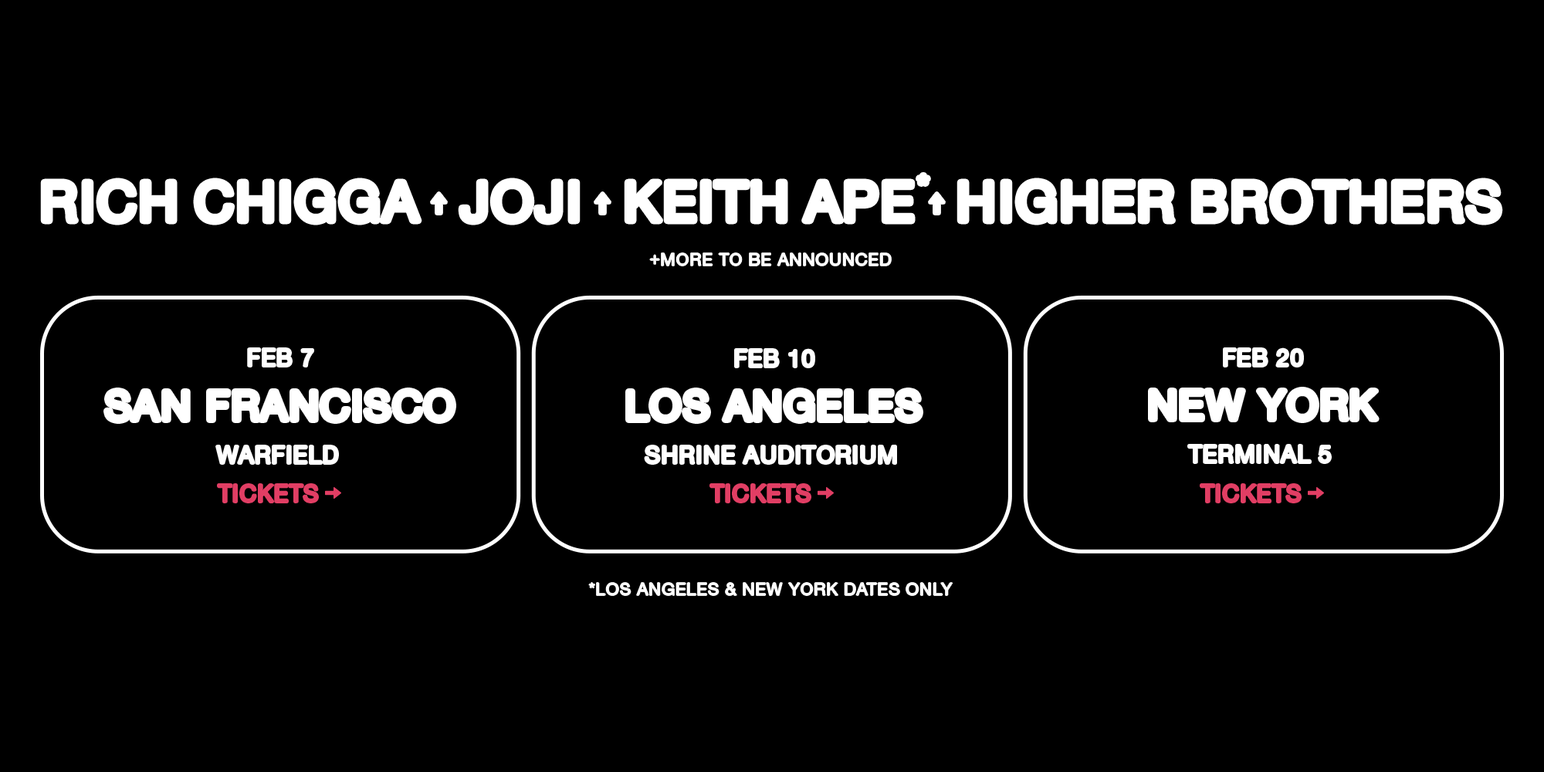
<style>
.page{position:relative;width:1544px;height:772px;background:#000000}
.page>*{position:absolute;margin:0}
.t1{font:54.4px "HelveticaNeueLTStd-Roman";letter-spacing:0.053em;color:#ffffff}
.t2{font:17px "HelveticaNeueLTStd-Roman";letter-spacing:0.05em;color:#ffffff}
.t3{font:23.2px "HelveticaNeueLTStd-Roman";letter-spacing:0.05em;color:#ffffff}
.t4{font:23.1px "HelveticaNeueLTStd-Roman";letter-spacing:0.05em;color:#ffffff}
.t5{font:40.4px "HelveticaNeueLTStd-Roman";letter-spacing:0.055em;color:#ffffff}
.t6{font:40.5px "HelveticaNeueLTStd-Roman";letter-spacing:0.055em;color:#ffffff}
.t7{font:23.2px "HelveticaNeueLTStd-Roman";letter-spacing:0.05em;color:#e13e64}
</style>
<div class="page">
<p class="t1" style="left:44px;top:181px;width:1456px;height:41px">RICH CHIGGA JOJI KEITH APE HIGHER BROTHERS</p>
<p class="t2" style="left:650px;top:253px;width:241px;height:13px">+MORE TO BE ANNOUNCED</p>
<p class="t3" style="left:249px;top:349px;width:64px;height:17px">FEB 7</p>
<p class="t3" style="left:736px;top:350px;width:78px;height:17px">FEB 10</p>
<p class="t4" style="left:1225px;top:349px;width:78px;height:17px">FEB 20</p>
<p class="t5" style="left:1151px;top:390px;width:226px;height:30px">NEW YORK</p>
<p class="t6" style="left:107px;top:391px;width:346px;height:30px">SAN FRANCISCO</p>
<p class="t6" style="left:629px;top:391px;width:291px;height:30px">LOS ANGELES</p>
<p class="t3" style="left:217px;top:446px;width:120px;height:17px">WARFIELD</p>
<p class="t3" style="left:646px;top:446px;width:250px;height:17px">SHRINE AUDITORIUM</p>
<p class="t4" style="left:1189px;top:446px;width:141px;height:17px">TERMINAL 5</p>
<p class="t7" style="left:219px;top:485px;width:98px;height:17px">TICKETS</p>
<p class="t7" style="left:711px;top:485px;width:99px;height:17px">TICKETS</p>
<p class="t7" style="left:1201px;top:485px;width:99px;height:17px">TICKETS</p>
<p class="t2" style="left:589px;top:583px;width:364px;height:12px">*LOS ANGELES &amp; NEW YORK DATES ONLY</p>
</div>
